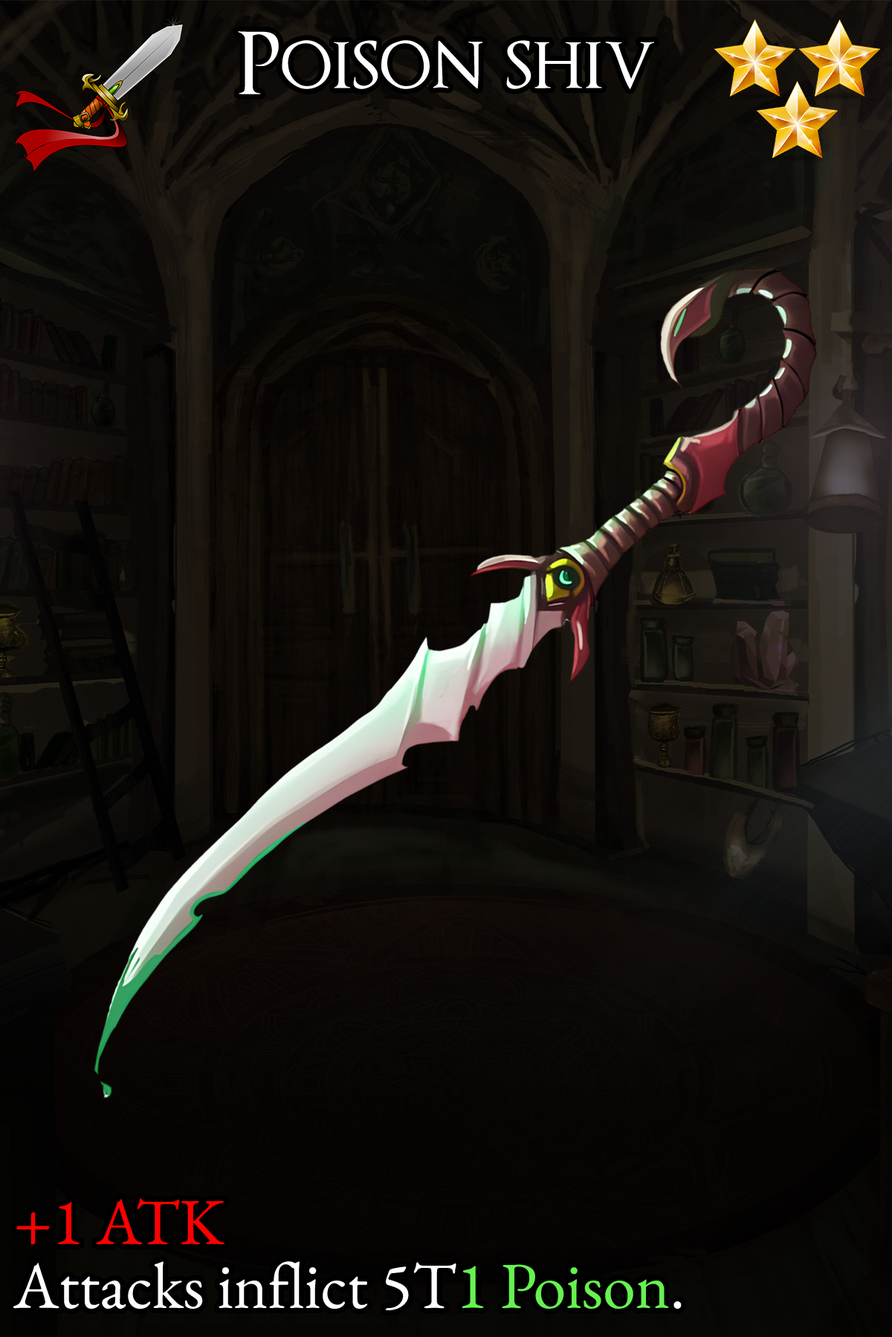
<style>
.page{position:relative;width:892px;height:1337px}
.page>*{position:absolute;margin:0}
.t1{font:144.1px "OptimusPrinceps";color:#ffffff}
.t2{font:112.2px/63.9px "EBGaramond-Regular";color:#ffffff}
.t3{font:112.2px/63.9px "EBGaramond-Regular";color:#ff0000}
.t4{font:112.2px/63.9px "EBGaramond-Regular";color:#66f24f}
</style>
<div class="page">
<p class="t1" style="left:238px;top:31px;width:416px;height:63px">Poison shiv</p>
<p class="t2" style="left:13px;top:1198px;width:668px;height:113px"><span class="t3">+1 ATK<br></span>Attacks inflict 5T<span class="t4">1 Poison</span>.</p>
</div>
